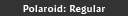
<style>
.page{position:relative;width:128px;height:16px;background:#333333}
.page>*{position:absolute;margin:0}
.t1{font:10px "AmiraParadiso";letter-spacing:0.05em;color:#ffffff}
</style>
<div class="page">
<p class="t1" style="left:23px;top:5px;width:83px;height:9px">Polaroid: Regular</p>
</div>
